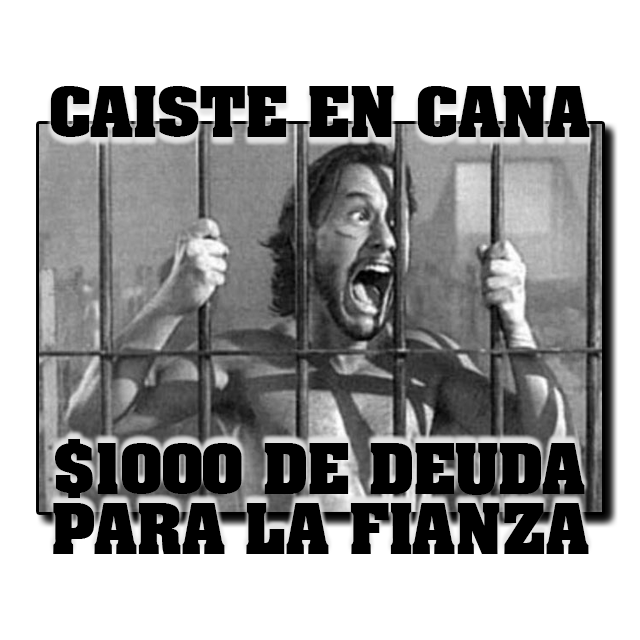
<style>
.page{position:relative;width:640px;height:640px;background:#ffffff}
.page>*{position:absolute;margin:0}
.t1{font:60px "AardvarkBold";color:#000000}
.t2{font:60px/60px "AardvarkBold";color:#000000}
</style>
<div class="page">
<p class="t1" style="left:50px;top:86px;width:540px;height:51px">CAISTE EN CANA</p>
<p class="t2" style="left:53px;top:439px;width:536px;height:115px;text-align:center">$1000 DE DEUDA<br>PARA LA FIANZA</p>
</div>
